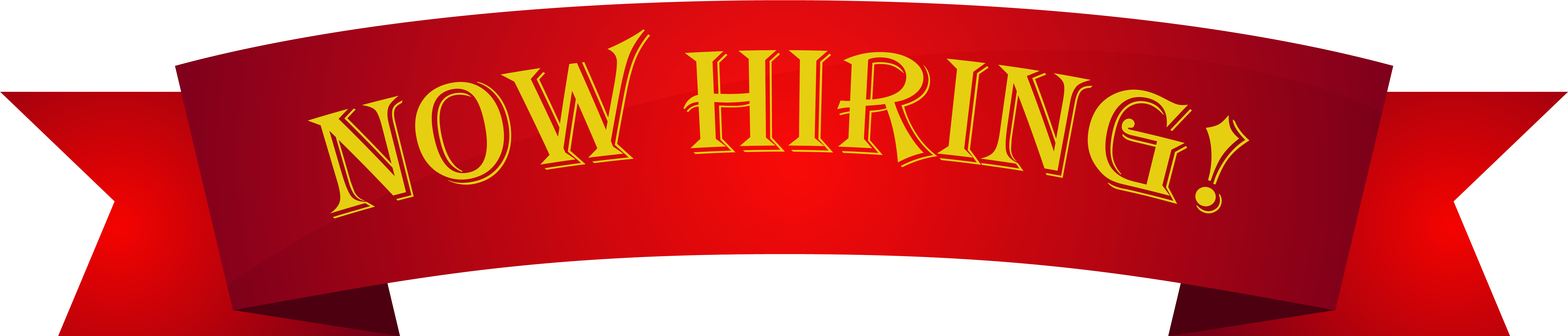
<style>
.page{position:relative;width:1568px;height:336px;background:#ffffff}
.page>*{position:absolute;margin:0}
.t1{font:152px "Algerian";color:#e6cf11}
</style>
<div class="page">
<p class="t1" style="left:308px;top:29px;width:941px;height:189px">NOW HIRING!</p>
</div>
